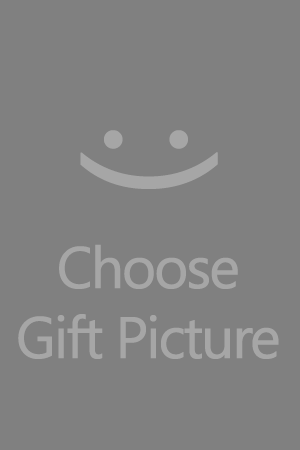
<style>
.page{position:relative;width:300px;height:450px;background:#808080}
.page>*{position:absolute;margin:0}
.t1{font:158.3px "SegoeUI";letter-spacing:-0.06em;color:#a6a6a6;font-weight:bold}
.t2{font:58.3px "SegoeUI";letter-spacing:-0.06em;color:#a6a6a6;font-weight:bold}
</style>
<div class="page">
<p class="t1" style="left:80px;top:130px;width:138px;height:59px;rotate:90deg">:)</p>
<p class="t2" style="left:18px;top:244px;width:261px;height:115px;text-align:center">Choose<br>Gift Picture</p>
</div>
